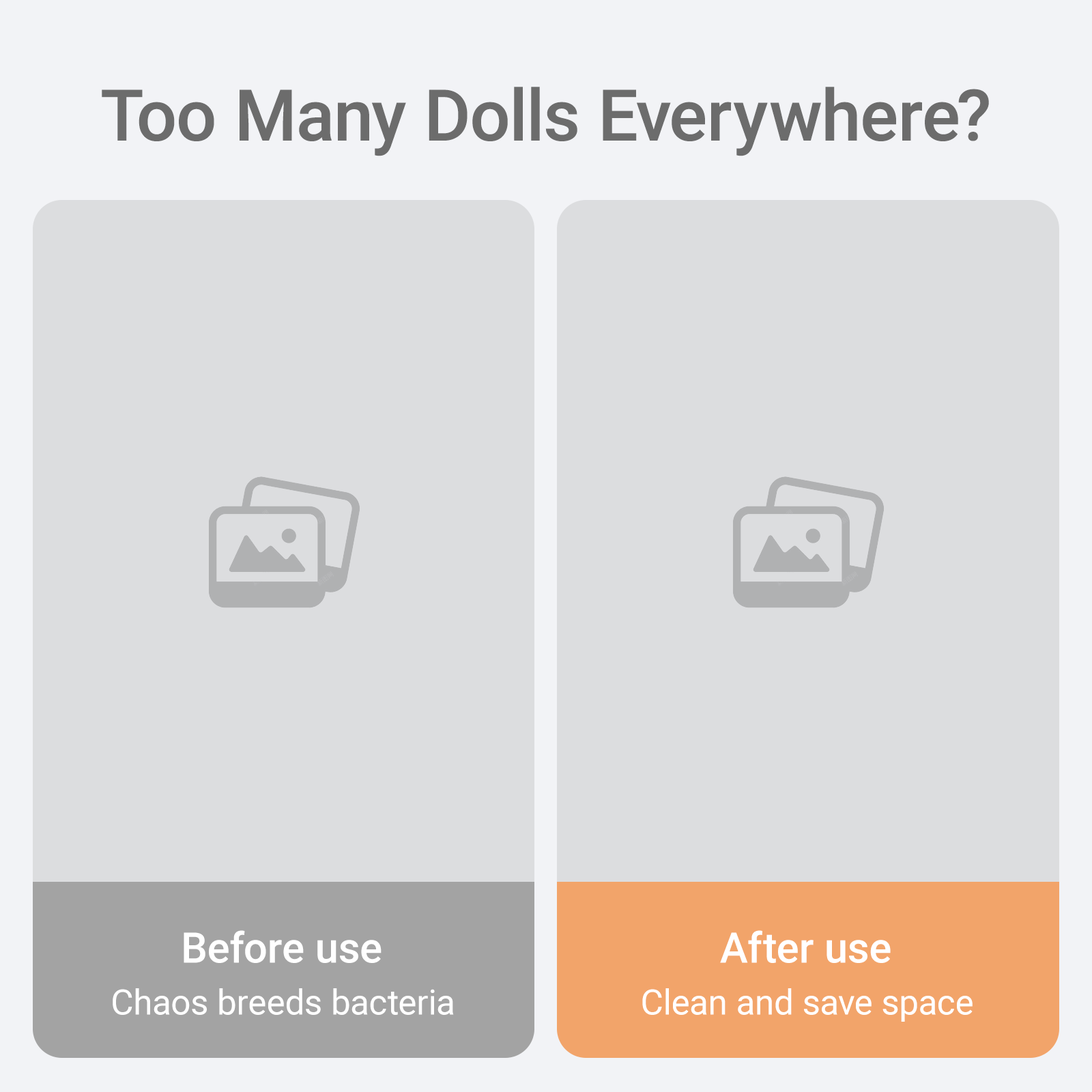
<style>
.page{position:relative;width:1092px;height:1092px;background:#dcdddf}
.page>*{position:absolute;margin:0}
.t1{font:71.3px "Roboto-Medium";color:#6c6c6c}
.t2{font:42.2px "Roboto-Medium";color:#ffffff}
.t3{font:34.9px "Roboto-Regular";color:#ffffff}
</style>
<div class="page">
<p class="t1" style="left:102px;top:87px;width:887px;height:69px">Too Many Dolls Everywhere?</p>
<p class="t2" style="left:184px;top:930px;width:198px;height:33px">Before use</p>
<p class="t2" style="left:720px;top:930px;width:171px;height:33px">After use</p>
<p class="t3" style="left:113px;top:988px;width:341px;height:27px">Chaos breeds bacteria</p>
<p class="t3" style="left:642px;top:988px;width:331px;height:34px">Clean and save space</p>
</div>
